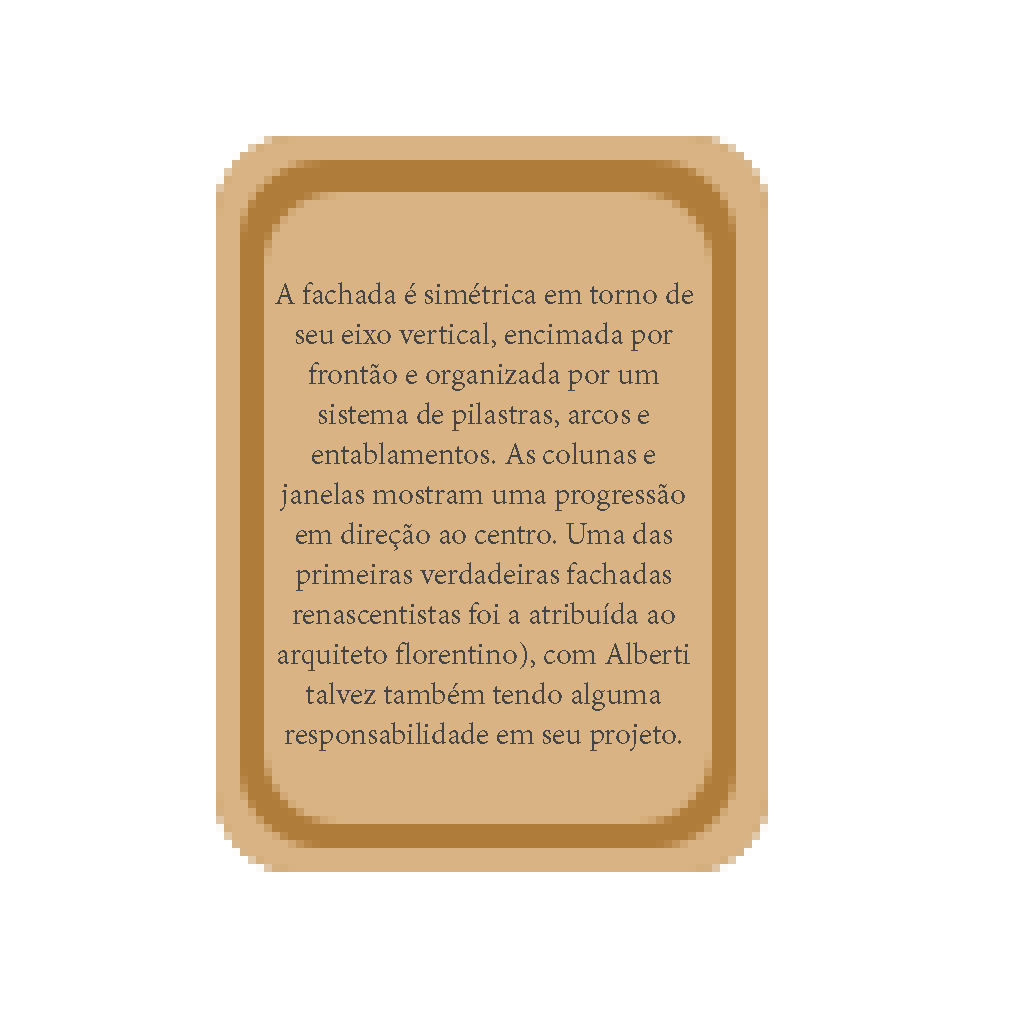
<style>
.page{position:relative;width:1024px;height:1024px;background:#ffffff}
.page>*{position:absolute;margin:0}
.t1{font:33.3px "AdobeDevanagari-Regular";color:#454545}
</style>
<div class="page">
<p class="t1" style="left:275px;top:282px;width:418px;height:469px;text-align:center">A fachada é simétrica em torno de seu eixo vertical, encimada por frontão e organizada por um sistema de pilastras, arcos e entablamentos. As colunas e janelas mostram uma progressão em direção ao centro. Uma das primeiras verdadeiras fachadas renascentistas foi a atribuída ao arquiteto florentino), com Alberti talvez também tendo alguma responsabilidade em seu projeto.</p>
</div>
